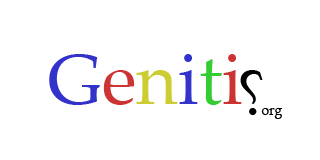
<style>
.page{position:relative;width:320px;height:160px;background:#ffffff}
.page>*{position:absolute;margin:0}
.t1{font:72px "PalatinoLinotype-Roman";color:#3333cc}
.t2{font:72px "PalatinoLinotype-Roman";color:#cc3333}
.t3{font:72px "PalatinoLinotype-Roman";color:#cccc33}
.t4{font:72px "PalatinoLinotype-Roman";color:#33cc33}
.t5{font:62px "PalatinoLinotype-Roman";color:#000000}
.t6{font:14px "PalatinoLinotype-Roman";color:#000000}
</style>
<div class="page">
<p class="t1" style="left:49px;top:54px;width:193px;height:51px">G<span class="t2">e</span><span class="t3">n</span>i<span class="t4">t</span><span class="t2">i</span></p>
<p class="t5" style="left:240px;top:70px;width:23px;height:45px;rotate:180deg">?</p>
<p class="t6" style="left:261px;top:108px;width:22px;height:11px">org</p>
</div>
